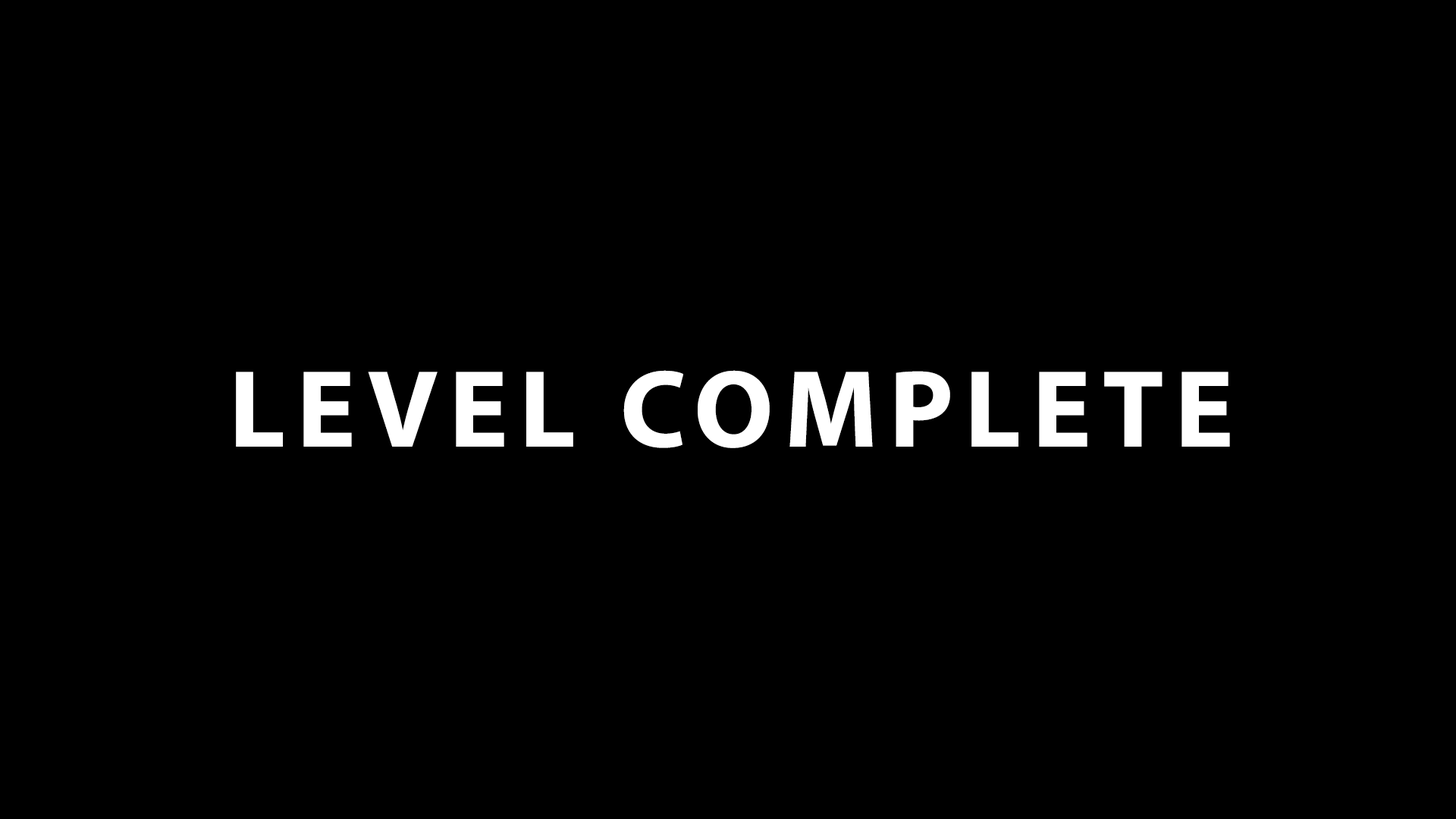
<style>
.page{position:relative;width:1456px;height:819px;background:#000000}
.page>*{position:absolute;margin:0}
.t1{font:110.7px "MyriadPro-Bold";letter-spacing:0.1em;color:#ffffff}
</style>
<div class="page">
<p class="t1" style="left:236px;top:370px;width:994px;height:78px">LEVEL COMPLETE</p>
</div>
